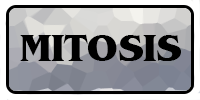
<style>
.page{position:relative;width:200px;height:100px}
.page>*{position:absolute;margin:0}
.t1{font:38.9px "AGBenguiatCyrBoldBold";color:#000000}
</style>
<div class="page">
<p class="t1" style="left:20px;top:34px;width:161px;height:27px">MITOSIS</p>
</div>
